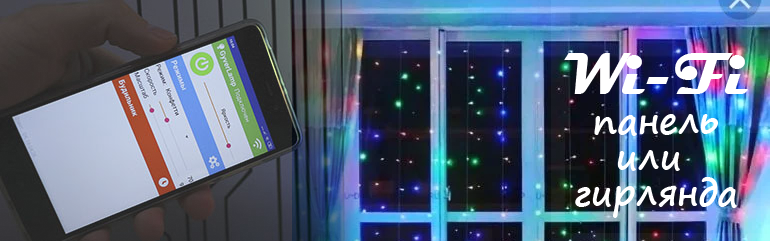
<style>
.page{position:relative;width:770px;height:241px}
.page>*{position:absolute;margin:0}
.t1{font:60px "Magneto-Bold";color:#fefefe}
.t2{font:36px/36px "SegoePrint-Bold";color:#ffffff}
</style>
<div class="page">
<p class="t1" style="left:564px;top:53px;width:184px;height:41px">Wi-Fi</p>
<p class="t2" style="left:575px;top:114px;width:162px;height:104px;text-align:center">панель<br>или <br>гирлянда</p>
</div>
